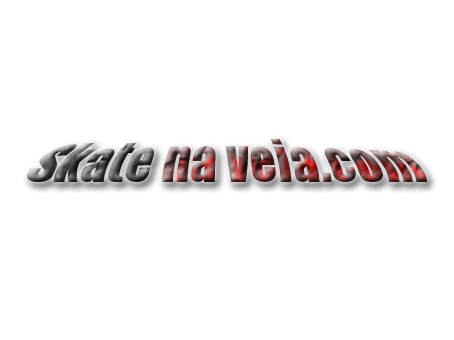
<style>
.page{position:relative;width:454px;height:340px;background:#ffffff}
.page>*{position:absolute;margin:0}
.t1{font:42px "Impact"}
</style>
<div class="page">
<p class="t1" style="left:27px;top:139px;width:400px;height:43px">Skate na veia.com</p>
</div>
